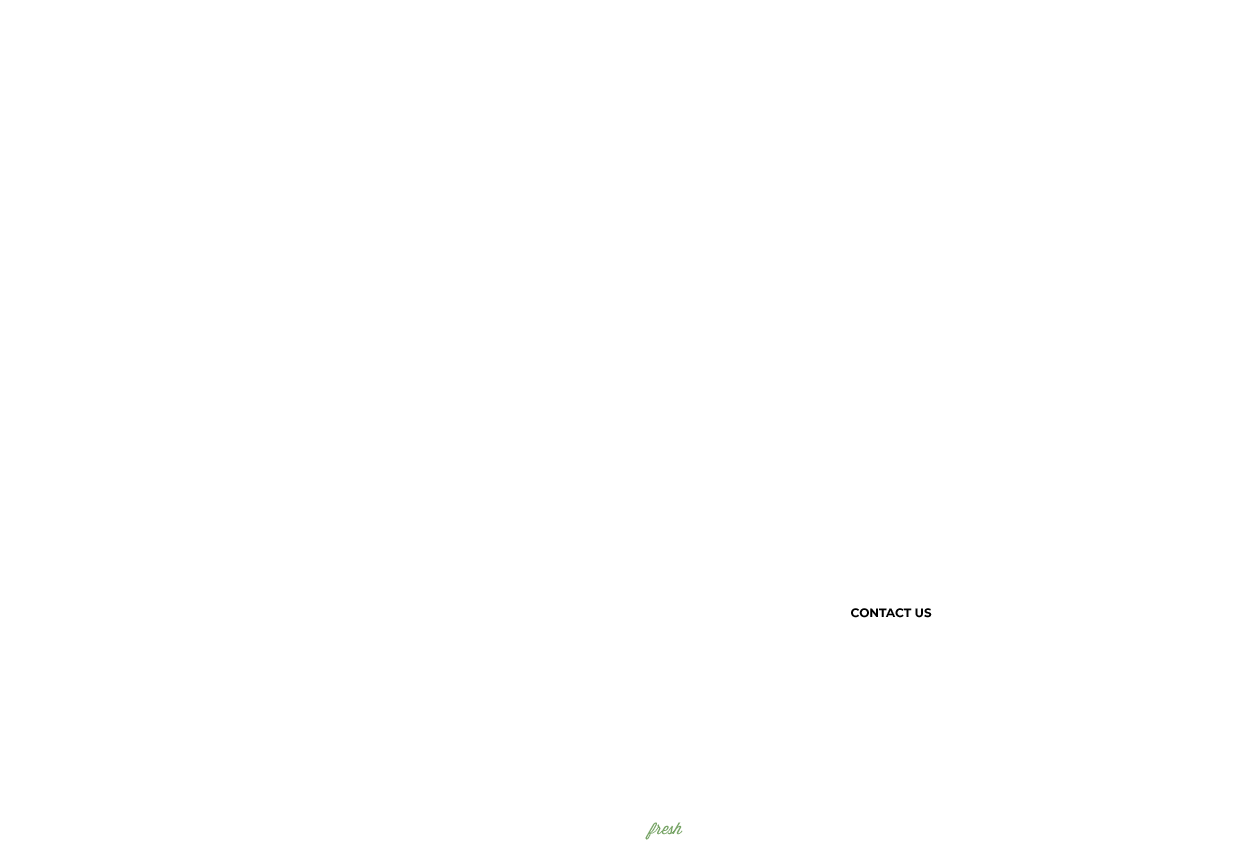
<style>
.page{position:relative;width:1240px;height:868px;background:#ffffff}
.page>*{position:absolute;margin:0}
.t1{font:12px "Montserrat-Bold";color:#000000;text-transform:uppercase}
.t2{font:16px "Wisdom-Script";color:#77a466}
</style>
<div class="page">
<p class="t1" style="left:851px;top:608px;width:81px;height:10px">CONTACT US</p>
<p class="t2" style="left:645px;top:822px;width:38px;height:18px">fresh</p>
</div>
